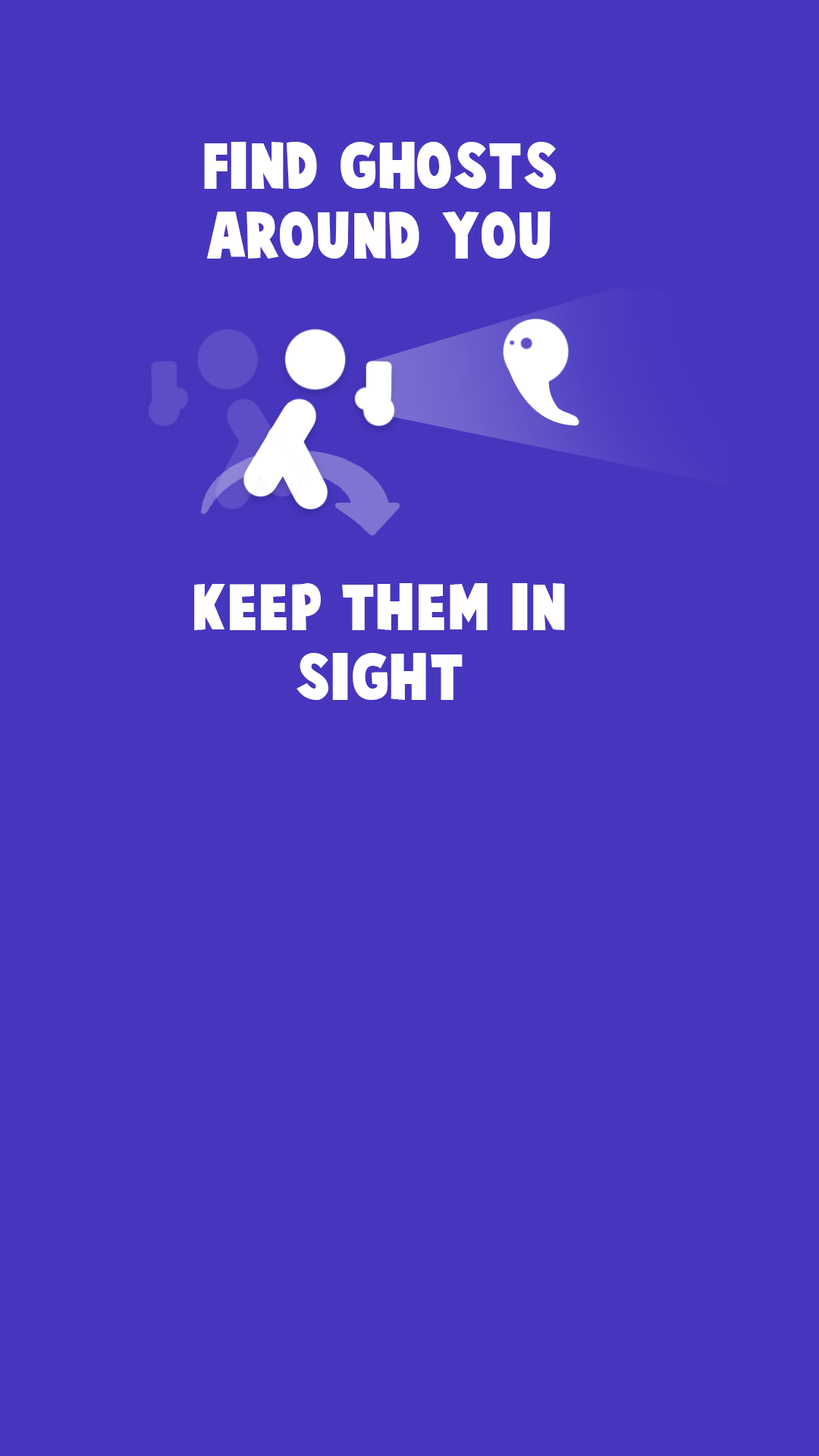
<style>
.page{position:relative;width:819px;height:1456px;background:#4636be}
.page>*{position:absolute;margin:0}
.t1{font:58.4px "CartoonistKooky";color:#ffffff}
</style>
<div class="page">
<p class="t1" style="left:204px;top:142px;width:352px;height:117px;text-align:center">Find ghosts around you</p>
<p class="t1" style="left:194px;top:583px;width:371px;height:117px;text-align:center">keep them in sight</p>
</div>
